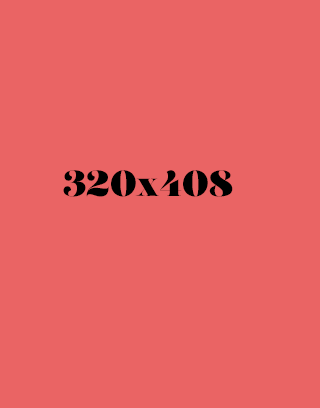
<style>
.page{position:relative;width:320px;height:408px;background:#ea6464}
.page>*{position:absolute;margin:0}
.t1{font:36px "Salome-Fine";color:#000000}
</style>
<div class="page">
<p class="t1" style="left:63px;top:170px;width:170px;height:27px">320x408</p>
</div>
